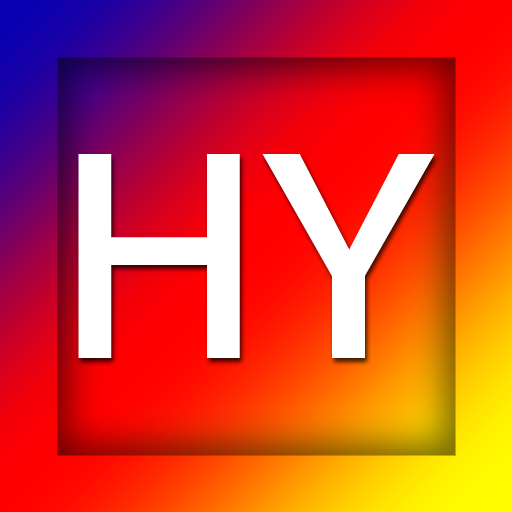
<style>
.page{position:relative;width:512px;height:512px}
.page>*{position:absolute;margin:0}
.t1{font:250px "OPPOSans-B";color:#ffffff}
</style>
<div class="page">
<p class="t1" style="left:78px;top:154px;width:357px;height:204px">HY</p>
</div>
